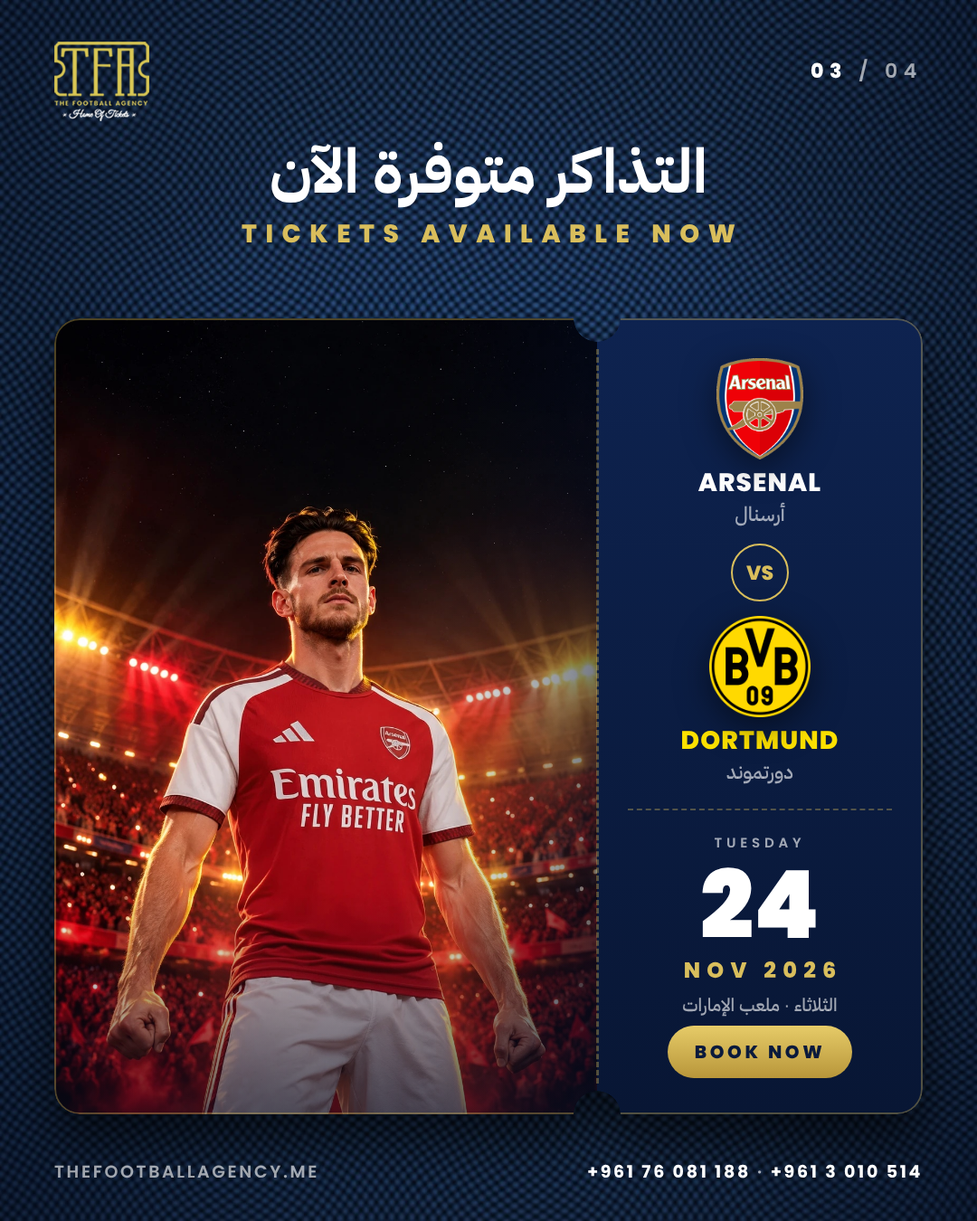
<style>
.page{position:relative;width:977px;height:1221px}
.page>*{position:absolute;margin:0}
.t1{font:19.9px "Poppins-SemiBold";letter-spacing:0.3em;color:#ffffff}
.t2{font:19.9px "Poppins-ExtraBold";letter-spacing:0.3em;color:#ffffff}
.t3{font:61.5px "IBMPlexSansArabic-Bold";color:#ffffff}
.t4{font:25.3px "Poppins-ExtraBold";letter-spacing:0.34em;color:#d9be5c}
.t5{font:25.3px "Poppins-ExtraBold";letter-spacing:0.04em;color:#ffffff}
.t6{font:19.9px "IBMPlexSansArabic-Medium"}
.t7{font:19.9px "Poppins-ExtraBold";color:#d9be5c}
.t8{font:25.3px "Poppins-ExtraBold";letter-spacing:0.04em;color:#fde100}
.t9{font:13.6px "Poppins-SemiBold";letter-spacing:0.32em}
.t10{font:94.1px "Poppins-Black";color:#ffffff}
.t11{font:21.7px "Poppins-ExtraBold";letter-spacing:0.3em;color:#d9be5c}
.t12{font:18.1px "IBMPlexSansArabic-Medium"}
.t13{font:18.1px "Poppins-ExtraBold";letter-spacing:0.18em;color:#0a1a3c}
.t14{font:17.2px "Poppins-SemiBold";letter-spacing:0.14em}
.t15{font:17.2px "Poppins-Bold";letter-spacing:0.14em;color:#ffffff}
.t16{font:17.2px "Poppins-SemiBold";letter-spacing:0.14em;color:#ffffff}
</style>
<div class="page">
<p class="t1" style="left:810px;top:59px;width:106px;height:22px"><span class="t2">03</span> / 04</p>
<p class="t3" style="left:271px;top:142px;width:433px;height:66px">التذاكر متوفرة الآن</p>
<p class="t4" style="left:241px;top:224px;width:494px;height:19px">TICKETS AVAILABLE NOW</p>
<p class="t5" style="left:698px;top:473px;width:122px;height:19px">ARSENAL</p>
<p class="t6" style="left:735px;top:502px;width:50px;height:24px">أرسنال</p>
<p class="t7" style="left:746px;top:565px;width:27px;height:16px">VS</p>
<p class="t8" style="left:682px;top:731px;width:155px;height:19px">DORTMUND</p>
<p class="t6" style="left:726px;top:766px;width:67px;height:18px">دورتموند</p>
<p class="t9" style="left:714px;top:837px;width:87px;height:10px">TUESDAY</p>
<p class="t10" style="left:702px;top:867px;width:114px;height:71px">24</p>
<p class="t11" style="left:685px;top:961px;width:151px;height:18px">NOV 2026</p>
<p class="t12" style="left:683px;top:998px;width:154px;height:18px">الثلاثاء · ملعب الإمارات</p>
<p class="t13" style="left:695px;top:1045px;width:127px;height:14px">BOOK NOW</p>
<p class="t14" style="left:54px;top:1165px;width:263px;height:13px">THEFOOTBALLAGENCY.ME</p>
<p class="t15" style="left:588px;top:1164px;width:332px;height:14px">+961 76 081 188<span class="t16"> · </span>+961 3 010 514</p>
</div>
